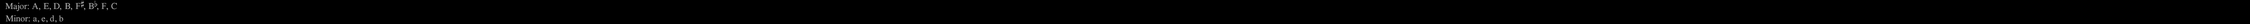
<style>
.page{position:relative;width:2250px;height:24px;background:#000000}
.page>*{position:absolute;margin:0}
.t1{font:9px "OpusChords";color:#ababab}
.t2{font:9px "Times-Roman";color:#ababab}
.t3{font:9px "OpusChords";letter-spacing:-0.04em;color:#ababab}
.t4{font:9px "Times-Roman";letter-spacing:-0.04em;color:#ababab}
.t5{font:9px "OpusChords";letter-spacing:-0.08em;color:#ababab}
.t6{font:9px "Times-Roman";letter-spacing:-0.08em;color:#ababab}
.t7{font:9px "OpusChords";letter-spacing:-0.05em;color:#ababab}
.t8{font:9px "Times-Roman";letter-spacing:-0.05em;color:#ababab}
.t9{font:9px "OpusChords";letter-spacing:-0.15em;color:#ababab}
.t10{font:9px "Times-Roman";letter-spacing:-0.15em;color:#ababab}
.t11{font:8.8px "Times-Roman";color:#ababab}
</style>
<div class="page">
<p class="t1" style="left:5px;top:0px;width:112px;height:11px">Major<span class="t2">:  </span><span class="t3">A</span><span class="t4">,</span>   E<span class="t2">,  </span><span class="t5">D</span><span class="t6">,   </span><span class="t7">B</span><span class="t8">,   </span>F<span class="t9">#</span><span class="t10">,</span>    B<span class="t9">b</span><span class="t10">,    </span><span class="t7">F</span><span class="t8">,</span>   C</p>
<p class="t1" style="left:6px;top:15px;width:57px;height:8px">Minor<span class="t2">:</span>  a<span class="t2">,</span>  e<span class="t2">,</span>  d<span class="t2">,  </span><span class="t11">b</span></p>
</div>
